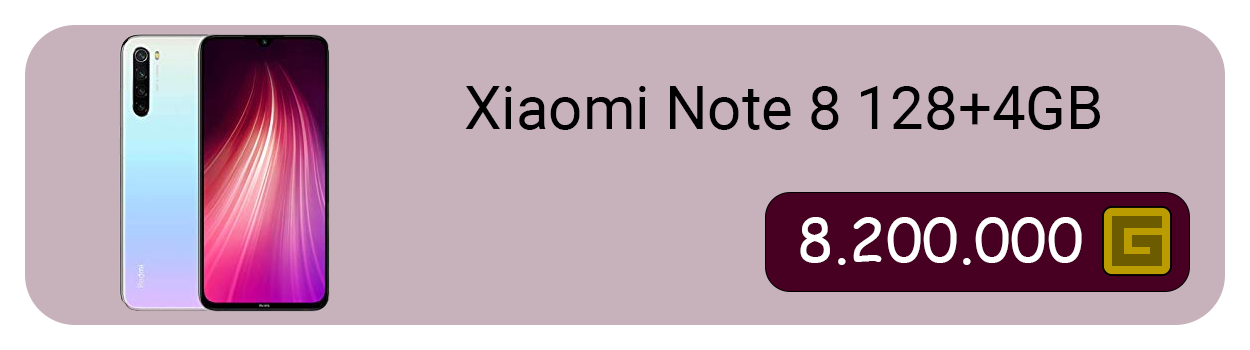
<style>
.page{position:relative;width:1250px;height:350px;background:#c7b2bc}
.page>*{position:absolute;margin:0}
.t1{font:60px "Roboto-Regular";color:#000000}
.t2{font:60px "ComicSansMS";color:#ffffff}
</style>
<div class="page">
<p class="t1" style="left:465px;top:86px;width:635px;height:44px">Xiaomi Note 8 128+4GB</p>
<p class="t2" style="left:800px;top:217px;width:282px;height:48px">8.200.000</p>
</div>
